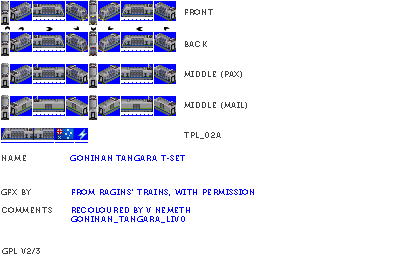
<style>
.page{position:relative;width:400px;height:270px;background:#ffffff}
.page>*{position:absolute;margin:0}
.t1{font:8px "Museo700-Regular";letter-spacing:0.075em;color:#404040;text-transform:uppercase}
.t2{font:8px "Museo700-Regular";letter-spacing:0.075em;color:#0000ff;text-transform:uppercase}
</style>
<div class="page">
<p class="t1" style="left:185px;top:9px;width:28px;height:6px">front</p>
<p class="t1" style="left:185px;top:41px;width:22px;height:6px">back</p>
<p class="t1" style="left:184px;top:71px;width:58px;height:7px">middle (pax)</p>
<p class="t1" style="left:184px;top:102px;width:63px;height:7px">middle (mail)</p>
<p class="t1" style="left:184px;top:132px;width:37px;height:7px">tpl_02a</p>
<p class="t1" style="left:2px;top:155px;width:24px;height:6px">name</p>
<p class="t2" style="left:70px;top:155px;width:115px;height:6px">Goninan Tangara T-Set</p>
<p class="t1" style="left:1px;top:189px;width:30px;height:6px">gfx by</p>
<p class="t2" style="left:72px;top:189px;width:182px;height:7px">from ragins' trains, with permission</p>
<p class="t1" style="left:2px;top:207px;width:50px;height:6px">comments</p>
<p class="t2" style="left:71px;top:207px;width:119px;height:16px">recoloured by v nemeth<br>Goninan_Tangara_Liv0</p>
<p class="t1" style="left:2px;top:248px;width:38px;height:6px">gpl v2/3</p>
</div>
